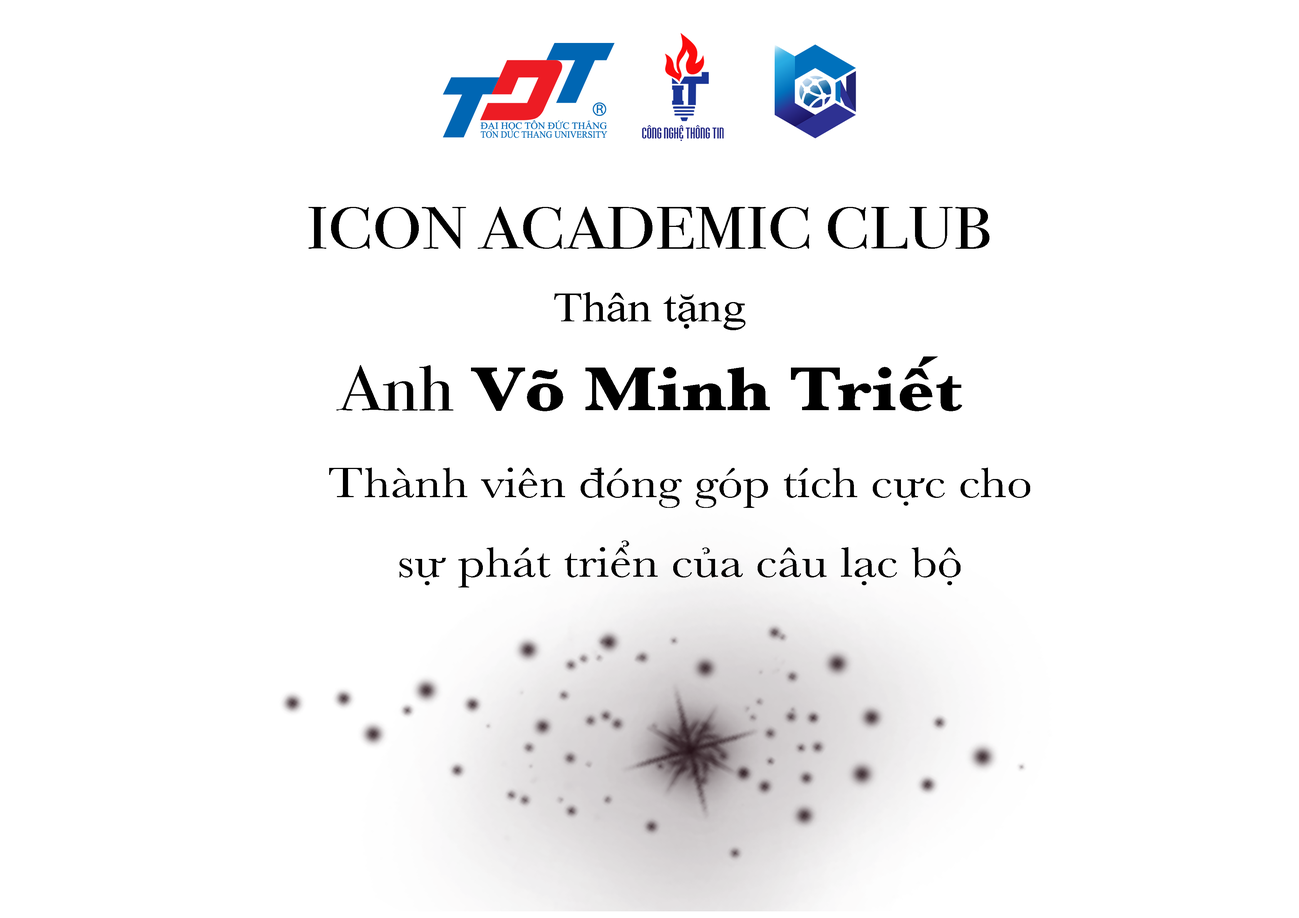
<style>
.page{position:relative;width:1299px;height:918px;background:#ffffff}
.page>*{position:absolute;margin:0}
.t1{font:59.3px "BodoniSvtyTwoOSITCTT-Book";color:#000000;scale:1.15 1}
.t2{font:41.6px "TimesNewRomanPSMT";color:#000000;scale:1.15 1}
.t3{font:64.1px "Baskerville-Bold";color:#000000;scale:1.15 1}
.t4{font:64.1px "BodoniSvtyTwoOSITCTT-Book";color:#000000;scale:1.15 1}
.t5{font:44.2px/79.8px "Baskerville";color:#000000;scale:1.15 1}
</style>
<div class="page">
<p class="t1" style="left:308px;top:207px;width:681px;height:42px">ICON ACADEMIC CLUB</p>
<p class="t2" style="left:554px;top:292px;width:191px;height:38px">Thân tặng</p>
<p class="t3" style="left:336px;top:357px;width:626px;height:54px"><span class="t4">Anh</span> Võ Minh Triết</p>
<p class="t5" style="left:329px;top:468px;width:701px;height:120px;text-align:center">Thành viên đóng góp tích cực cho sự phát triển của câu lạc bộ</p>
</div>
